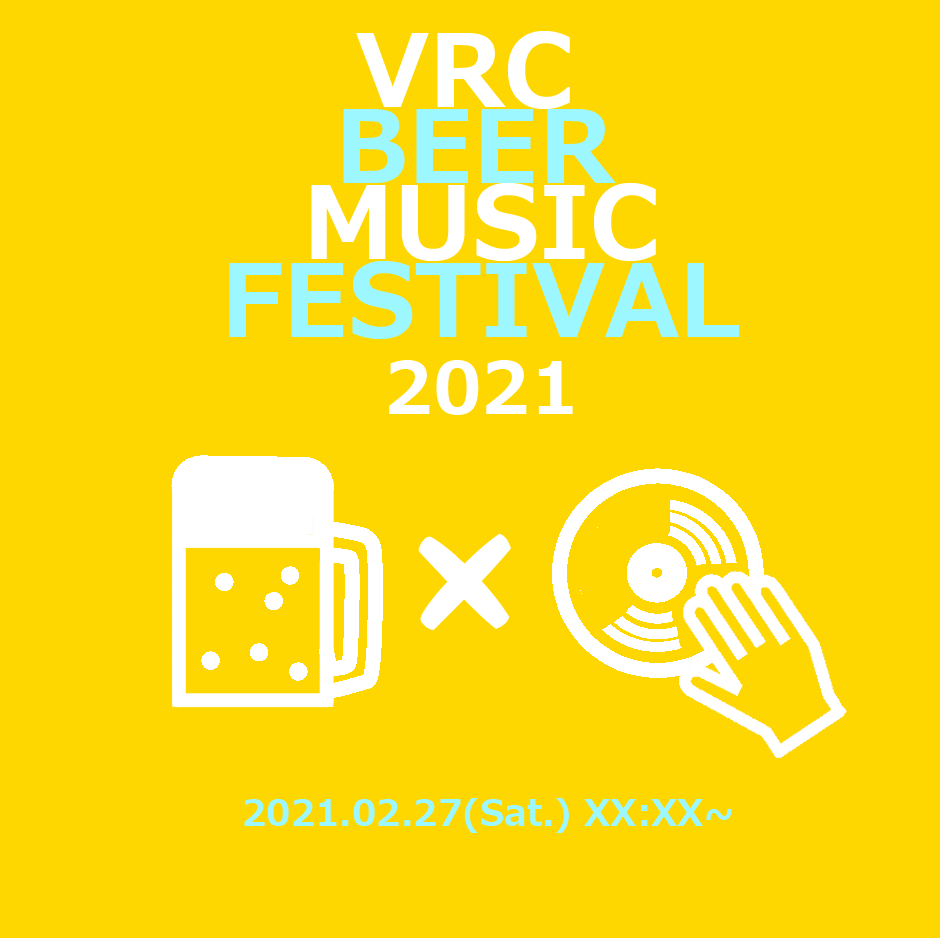
<style>
.page{position:relative;width:940px;height:938px;background:#ffd700}
.page>*{position:absolute;margin:0}
.t1{font:100px "Meiryo-Bold";color:#ffffff}
.t2{font:100px "Meiryo-Bold";color:#9df7ff}
.t3{font:72px "Meiryo-Bold";color:#ffffff}
.t4{font:150px "KFhimaji";color:#ffffff}
.t5{font:36px "Meiryo-Bold";color:#9df7ff}
</style>
<div class="page">
<p class="t1" style="left:356px;top:31px;width:214px;height:78px">VRC</p>
<p class="t2" style="left:343px;top:109px;width:273px;height:74px">BEER</p>
<p class="t1" style="left:311px;top:183px;width:345px;height:78px">MUSIC</p>
<p class="t2" style="left:229px;top:261px;width:510px;height:78px">FESTIVAL</p>
<p class="t3" style="left:389px;top:360px;width:184px;height:55px">2021</p>
<p class="t4" style="left:418px;top:533px;width:93px;height:97px">×</p>
<p class="t5" style="left:244px;top:798px;width:488px;height:35px">2021.02.27(Sat.) XX:XX~</p>
</div>
